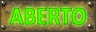
<style>
.page{position:relative;width:96px;height:32px}
.page>*{position:absolute;margin:0}
.t1{font:25.3px "Calibri-Bold";letter-spacing:-0.02em;font-weight:bold;scale:0.89 1}
</style>
<div class="page">
<p class="t1" style="left:9px;top:7px;width:77px;height:18px">ABERTO</p>
</div>
